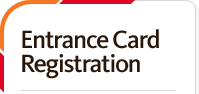
<style>
.page{position:relative;width:199px;height:94px;background:#ffffff}
.page>*{position:absolute;margin:0}
.t1{font:26px/24px "KievitPro-Medium";letter-spacing:-0.05em;color:#29170a}
</style>
<div class="page">
<p class="t1" style="left:22px;top:29px;width:137px;height:50px">Entrance Card<br>Registration</p>
</div>
